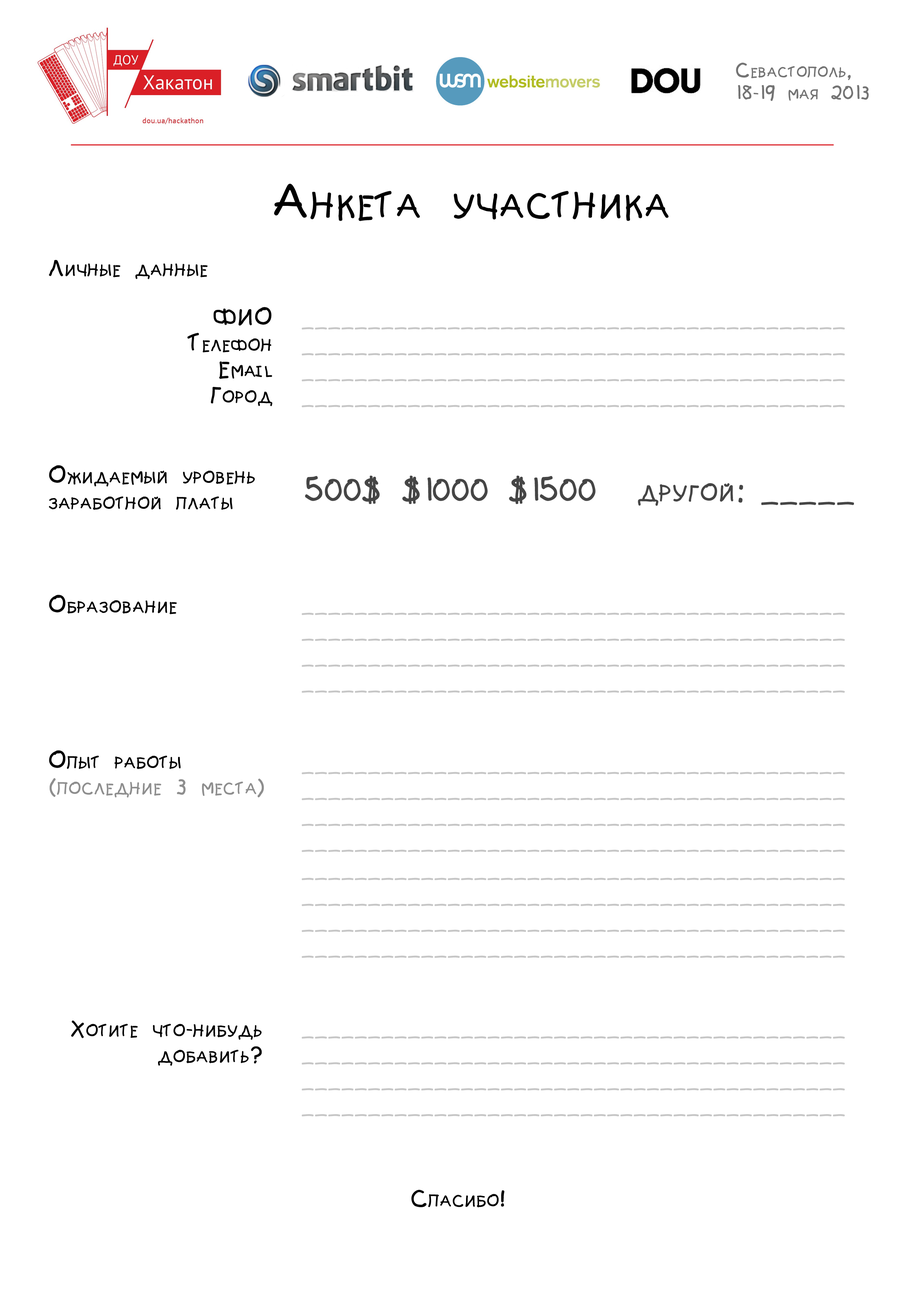
<style>
.page{position:relative;width:918px;height:1299px;background:#ffffff}
.page>*{position:absolute;margin:0}
.t1{font:18.5px "Teslic`sDocument";letter-spacing:0.025em;color:#737373;font-variant:small-caps}
.t2{font:46.3px "Teslic`sDocument";letter-spacing:0.025em;color:#000000;font-variant:small-caps}
.t3{font:21.6px "Teslic`sDocument";letter-spacing:0.025em;color:#010101;font-variant:small-caps}
.t4{font:21.6px "Teslic`sDocument";letter-spacing:0.025em;color:#8e8e8e;font-variant:small-caps}
.t5{font:21.6px "Teslic`sDocument";letter-spacing:0.025em;color:#c6c6c6;font-variant:small-caps}
.t6{font:30.9px "Teslic`sDocument";letter-spacing:0.025em;color:#454545;font-variant:small-caps}
.t7{font:21.6px "Teslic`sDocument";letter-spacing:0.025em;color:#000000;font-variant:small-caps}
</style>
<div class="page">
<p class="t1" style="left:736px;top:63px;width:133px;height:38px">Севастополь,<br>18-19 мая 2013</p>
<p class="t2" style="left:274px;top:184px;width:395px;height:37px">Анкета участника</p>
<p class="t3" style="left:49px;top:260px;width:215px;height:537px">Личные данные<br><br><br><br><br><br><br><br>Ожидаемый уровень <br>заработной платы<br><br><br><br>Образование<br><br><br><br><br><br>Опыт работы <br><span class="t4">(последние 3 места)</span></p>
<p class="t3" style="left:187px;top:307px;width:85px;height:99px;text-align:right">ФИО<br>Телефон<br>Email<br>Город</p>
<p class="t5" style="left:302px;top:327px;width:543px;height:80px">_________________________________________<br>_________________________________________<br>_________________________________________<br>_________________________________________</p>
<p class="t6" style="left:305px;top:475px;width:549px;height:31px">500$ $1000 $1500  другой: _____</p>
<p class="t5" style="left:302px;top:612px;width:543px;height:81px">_________________________________________<br>_________________________________________<br>_________________________________________<br>_________________________________________</p>
<p class="t5" style="left:302px;top:772px;width:543px;height:80px">_________________________________________<br>_________________________________________<br>_________________________________________<br>_________________________________________</p>
<p class="t5" style="left:302px;top:877px;width:543px;height:81px">_________________________________________<br>_________________________________________<br>_________________________________________<br>_________________________________________</p>
<p class="t3" style="left:71px;top:1020px;width:191px;height:45px;text-align:right">Хотите что-нибудь<br>добавить?</p>
<p class="t5" style="left:302px;top:1036px;width:543px;height:80px">_________________________________________<br>_________________________________________<br>_________________________________________<br>_________________________________________</p>
<p class="t7" style="left:411px;top:1190px;width:94px;height:17px">Спасибо!</p>
</div>
